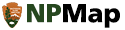
<style>
.page{position:relative;width:125px;height:30px;background:#ffffff}
.page>*{position:absolute;margin:0}
.t1{font:26px "FrutigerLTStd-Black";color:#000000}
.t2{font:26px "FrutigerLTStd-Black";color:#26471f}
</style>
<div class="page">
<p class="t1" style="left:27px;top:4px;width:93px;height:24px"><span class="t2">NP</span>Map</p>
</div>
